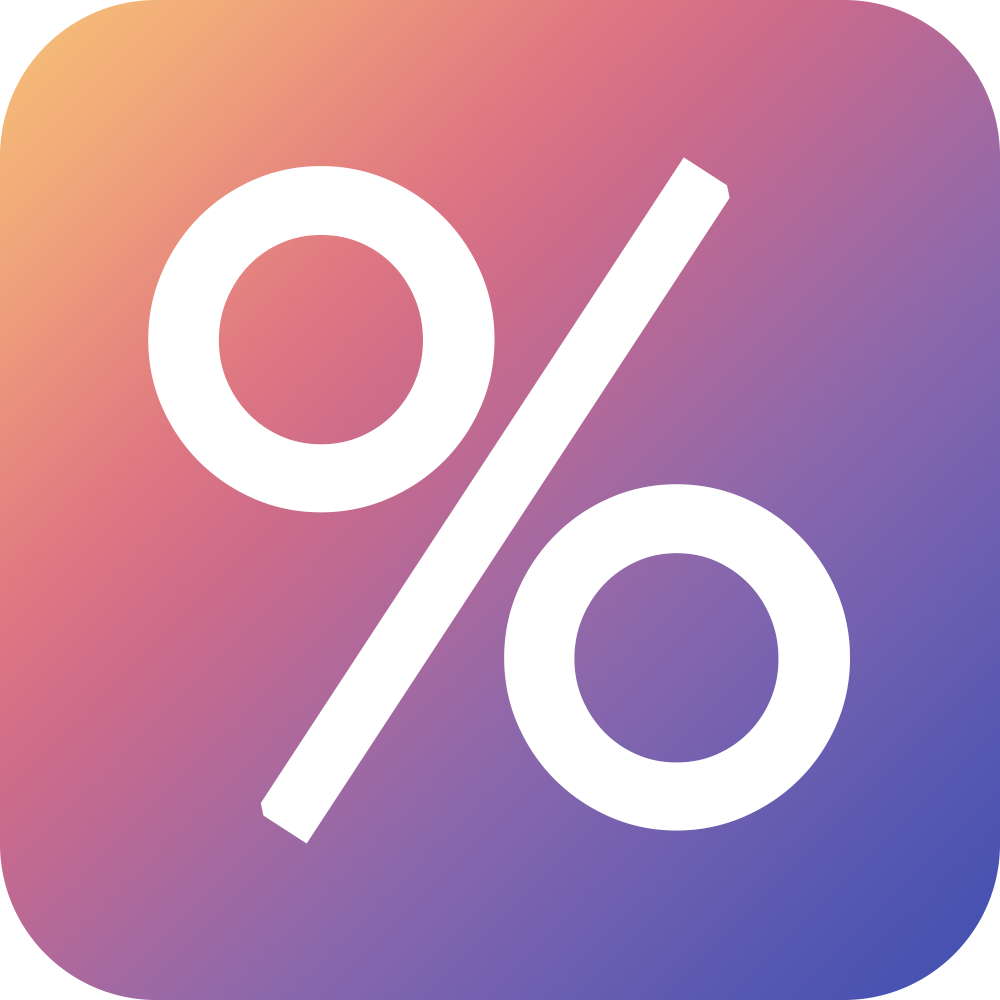
<style>
.page{position:relative;width:1000px;height:1000px}
.page>*{position:absolute;margin:0}
.t1{font:888.9px "Marcellus-Regular";color:#ffffff;font-weight:bold}
</style>
<div class="page">
<p class="t1" style="left:148px;top:157px;width:702px;height:687px">%</p>
</div>
